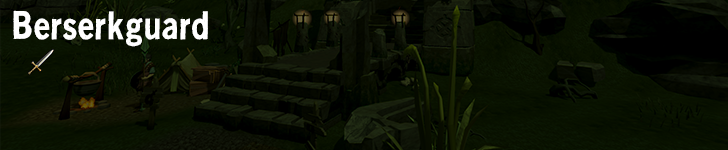
<style>
.page{position:relative;width:728px;height:150px}
.page>*{position:absolute;margin:0}
.t1{font:40px "Blackisnotacolor";color:#ffffff}
</style>
<div class="page">
<p class="t1" style="left:13px;top:10px;width:195px;height:37px">Berserkguard</p>
</div>
